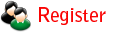
<style>
.page{position:relative;width:115px;height:32px;background:#ffffff}
.page>*{position:absolute;margin:0}
.t1{font:19px "BellGothicStd-Bold";color:#f90404}
</style>
<div class="page">
<p class="t1" style="left:39px;top:7px;width:67px;height:18px">Register</p>
</div>
